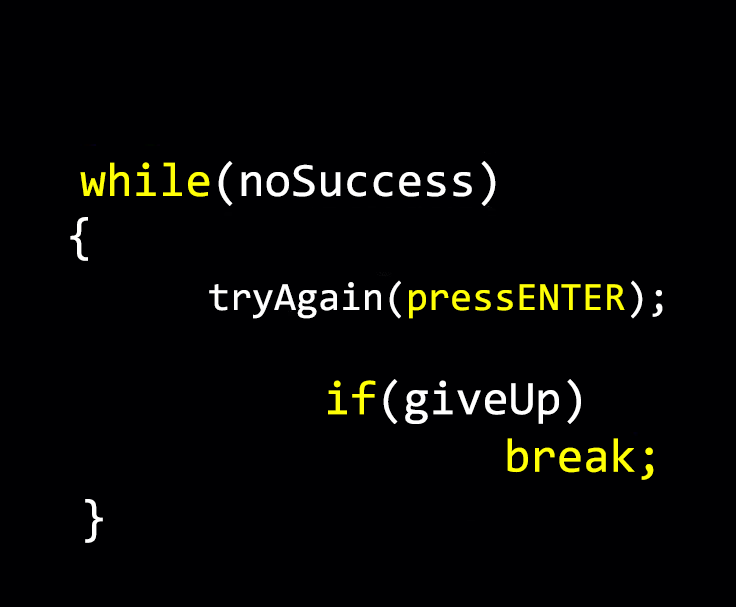
<style>
.page{position:relative;width:736px;height:607px;background:#000002}
.page>*{position:absolute;margin:0}
.t1{font:48px "Consolas";color:#ffffff}
.t2{font:48px "Consolas";color:#ffff06}
.t3{font:40px "Consolas";color:#ffff06}
.t4{font:40px "Consolas";color:#fefefe}
</style>
<div class="page">
<p class="t1" style="left:80px;top:161px;width:416px;height:45px"><span class="t2">while</span>(noSuccess)</p>
<p class="t1" style="left:70px;top:217px;width:18px;height:44px">{</p>
<p class="t3" style="left:209px;top:280px;width:454px;height:39px"><span class="t4">tryAgain(</span>pressENTER<span class="t4">);</span></p>
<p class="t1" style="left:328px;top:379px;width:326px;height:101px;text-align:right"><span class="t2">if</span>(giveUp)<br>     <span class="t2">break;</span></p>
<p class="t1" style="left:85px;top:499px;width:18px;height:44px">}</p>
</div>
